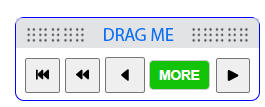
<style>
.page{position:relative;width:265px;height:107px;background:#ffffff}
.page>*{position:absolute;margin:0}
.t1{font:18px "MyriadPro-Regular";color:#0573f3}
</style>
<div class="page">
<p class="t1" style="left:104px;top:28px;width:70px;height:13px">DRAG ME</p>
</div>
